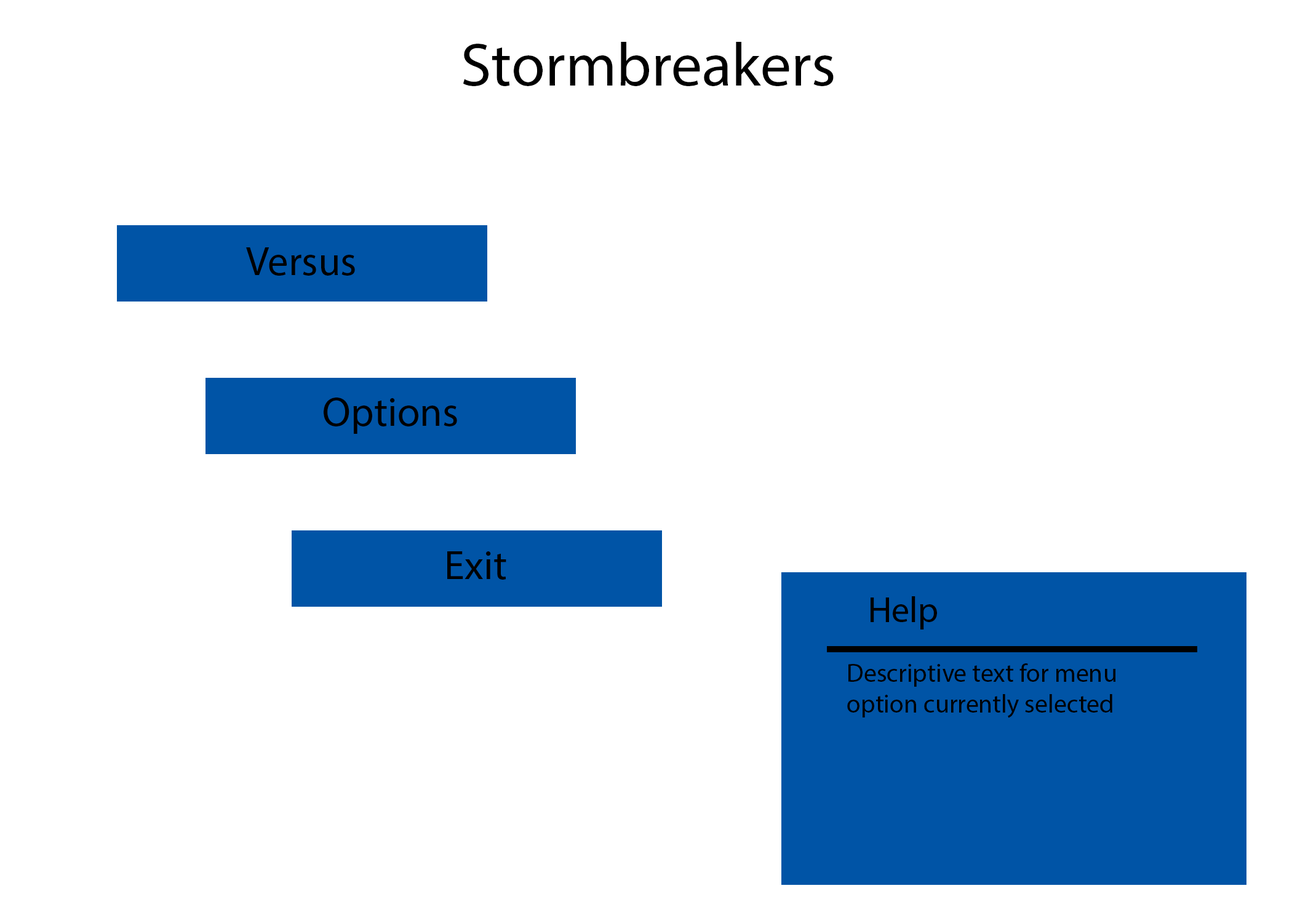
<style>
.page{position:relative;width:1292px;height:923px;background:#ffffff}
.page>*{position:absolute;margin:0}
.t1{font:61.5px "MyriadPro-Regular";color:#000000}
.t2{font:41px "MyriadPro-Regular";color:#000000}
.t3{font:35.9px "MyriadPro-Regular";color:#000000}
.t4{font:25.6px "MyriadPro-Regular";color:#000000}
</style>
<div class="page">
<p class="t1" style="left:463px;top:42px;width:371px;height:44px">Stormbreakers</p>
<p class="t2" style="left:246px;top:247px;width:109px;height:29px">Versus</p>
<p class="t2" style="left:324px;top:397px;width:133px;height:37px">Options</p>
<p class="t2" style="left:447px;top:551px;width:59px;height:29px">Exit</p>
<p class="t3" style="left:871px;top:596px;width:66px;height:33px">Help</p>
<p class="t4" style="left:847px;top:663px;width:269px;height:55px">Descriptive text for menu option currently selected</p>
</div>
